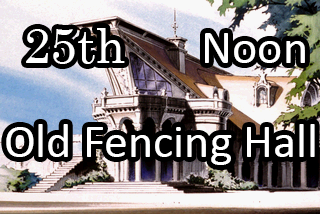
<style>
.page{position:relative;width:320px;height:214px}
.page>*{position:absolute;margin:0}
.t1{font:48px "Century";color:#ffffff}
.t2{font:48px "Calibri";color:#ffffff}
</style>
<div class="page">
<p class="t1" style="left:26px;top:28px;width:99px;height:36px">25th</p>
<p class="t2" style="left:205px;top:33px;width:100px;height:30px">Noon</p>
<p class="t2" style="left:6px;top:124px;width:309px;height:41px">Old Fencing Hall</p>
</div>
